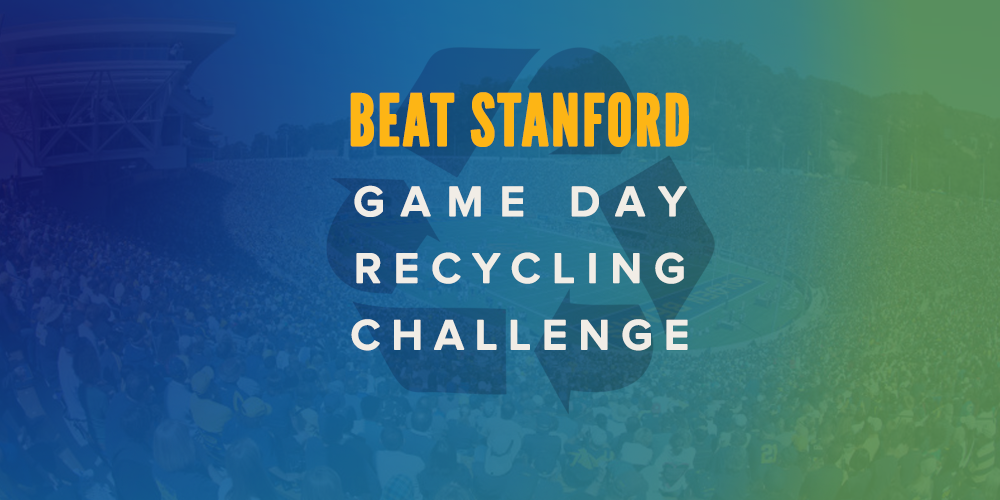
<style>
.page{position:relative;width:1000px;height:500px}
.page>*{position:absolute;margin:0}
.t1{font:70.3px "LeagueGothic-Regular";letter-spacing:0.02em;color:#fdb515;font-weight:bold}
.t2{font:43.3px/66.7px "ProximaNova-Semibold";letter-spacing:0.26em;color:#f1ede6;font-weight:bold}
.t3{font:43.3px/66.7px "ProximaNova-Semibold";letter-spacing:0.36em;color:#f1ede6;font-weight:bold}
.t4{font:43.3px/66.7px "ProximaNova-Semibold";letter-spacing:0.24em;color:#f1ede6;font-weight:bold}
</style>
<div class="page">
<p class="t1" style="left:350px;top:92px;width:339px;height:55px">BEAT STANFORD</p>
<p class="t2" style="left:351px;top:185px;width:337px;height:166px;text-align:center"><span class="t3">GAME DAY<br></span> RECYCLING <br><span class="t4">CHALLENGE</span></p>
</div>
